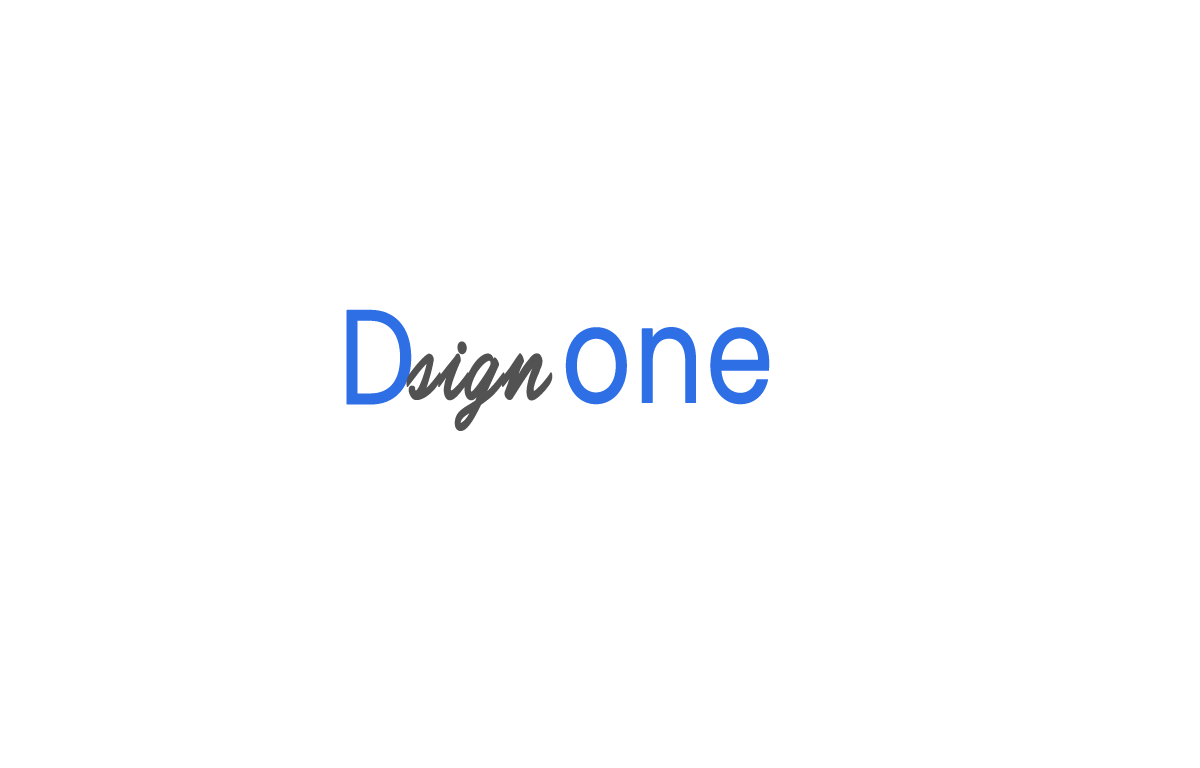
<style>
.page{position:relative;width:1200px;height:768px;background:#ffffff}
.page>*{position:absolute;margin:0}
.t1{font:134.3px "Poppins-Regular";color:#2e6fe6;font-weight:bold;scale:0.81 1}
.t2{font:134.3px "CarolinaMountainsPersonalUse";color:#525252;font-weight:bold;scale:0.81 1}
</style>
<div class="page">
<p class="t1" style="left:346px;top:309px;width:66px;height:96px">D</p>
<p class="t1" style="left:565px;top:327px;width:205px;height:78px">one</p>
<p class="t2" style="left:406px;top:341px;width:147px;height:90px">sign</p>
</div>
